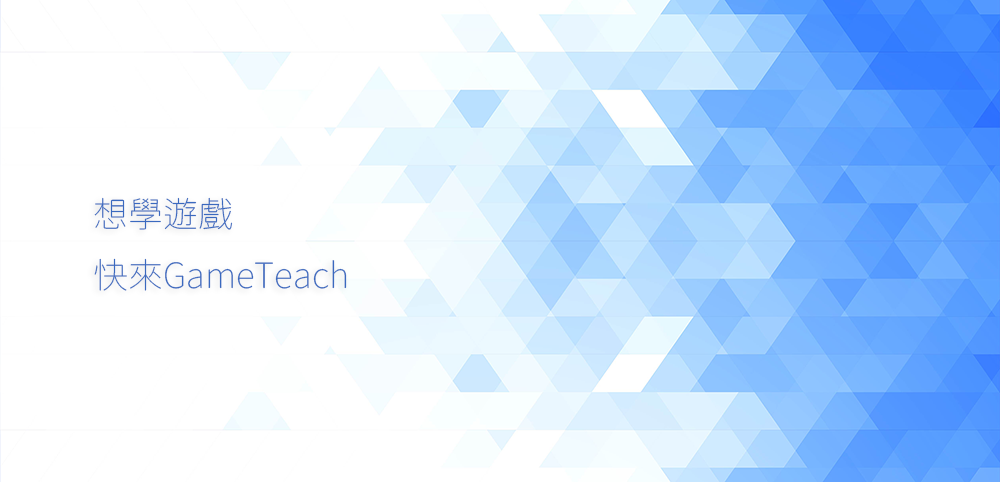
<style>
.page{position:relative;width:1000px;height:482px;background:#ffffff}
.page>*{position:absolute;margin:0}
.t1{font:35px "GenSenRoundedTW-EL";color:#3a69bf}
</style>
<div class="page">
<p class="t1" style="left:94px;top:197px;width:253px;height:94px">想學遊戲<br>快來GameTeach</p>
</div>
